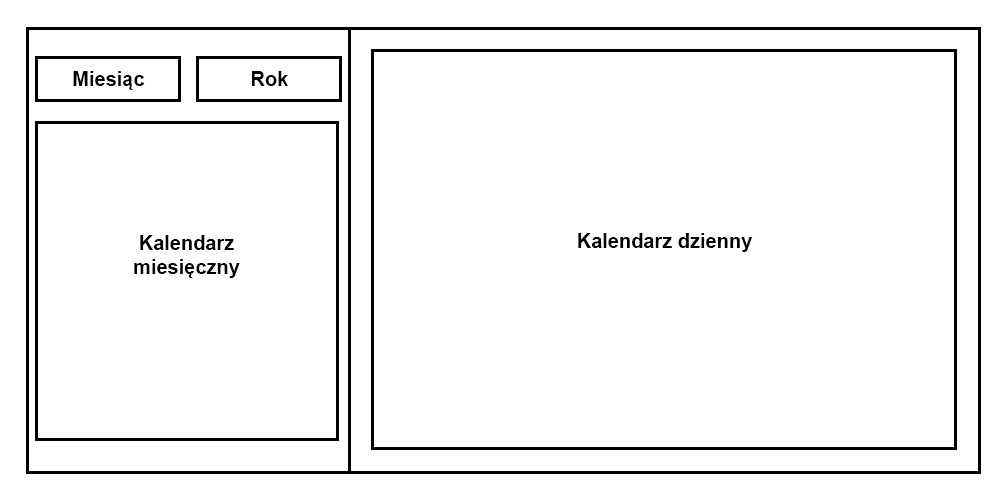
<style>
.page{position:relative;width:1000px;height:500px;background:#ffffff}
.page>*{position:absolute;margin:0}
.t1{font:20px "Arial-BoldMT";color:#000000}
</style>
<div class="page">
<p class="t1" style="left:73px;top:71px;width:72px;height:19px">Miesiąc</p>
<p class="t1" style="left:252px;top:71px;width:36px;height:15px">Rok</p>
<p class="t1" style="left:578px;top:233px;width:175px;height:19px">Kalendarz dzienny</p>
<p class="t1" style="left:134px;top:235px;width:106px;height:43px;text-align:center">Kalendarz<br>miesięczny</p>
</div>
